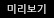
<style>
.page{position:relative;width:54px;height:18px;background:#000000}
.page>*{position:absolute;margin:0}
.t1{font:10px "MalgunGothic-Semilight";color:#ffffff}
</style>
<div class="page">
<p class="t1" style="left:7px;top:4px;width:39px;height:10px">미리보기</p>
</div>
